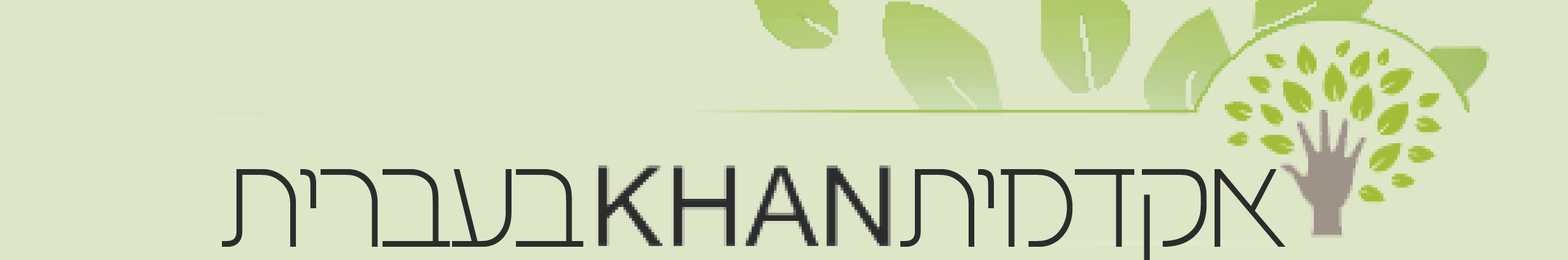
<style>
.page{position:relative;width:1568px;height:260px;background:#dde6c7}
.page>*{position:absolute;margin:0}
.t1{font:112.7px "BNBarak";letter-spacing:-0.06em;color:#2c2c2c}
</style>
<div class="page">
<p class="t1" style="left:222px;top:169px;width:362px;height:78px">תירבעב</p>
<p class="t1" style="left:900px;top:169px;width:385px;height:91px">תימדקא</p>
</div>
